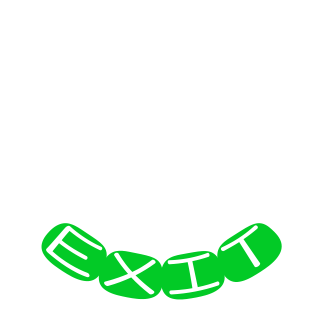
<style>
.page{position:relative;width:320px;height:320px;background:#ffffff}
.page>*{position:absolute;margin:0}
.t1{font:47.4px "KGGeronimoBlocks";color:#02ca26}
</style>
<div class="page">
<p class="t1" style="left:41px;top:223px;width:241px;height:77px">EXIT</p>
</div>
